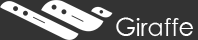
<style>
.page{position:relative;width:198px;height:40px;background:#333333}
.page>*{position:absolute;margin:0}
.t1{font:23.7px "STHeitiSC-Light";color:#ffffff}
</style>
<div class="page">
<p class="t1" style="left:116px;top:17px;width:77px;height:20px">Giraffe</p>
</div>
